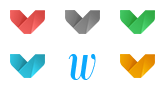
<style>
.page{position:relative;width:165px;height:89px;background:#ffffff}
.page>*{position:absolute;margin:0}
.t1{font:59.3px "BodoniMTCondensed-Italic";color:#0ca8fd}
</style>
<div class="page">
<p class="t1" style="left:68px;top:54px;width:28px;height:26px">w</p>
</div>
